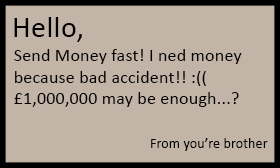
<style>
.page{position:relative;width:280px;height:168px;background:#c2b4a7}
.page>*{position:absolute;margin:0}
.t1{font:30px "Calibri";letter-spacing:0.01em;color:#000000}
.t2{font:18px "Calibri";letter-spacing:0.01em;color:#000000}
.t3{font:14px "Calibri";letter-spacing:0.01em;color:#000000}
</style>
<div class="page">
<p class="t1" style="left:14px;top:17px;width:68px;height:25px">Hello,</p>
<p class="t2" style="left:14px;top:49px;width:228px;height:58px">Send Money fast! I ned money <br>because bad accident!! :((<br>£1,000,000 may be enough...?</p>
<p class="t3" style="left:151px;top:138px;width:117px;height:13px">From you’re brother</p>
</div>
